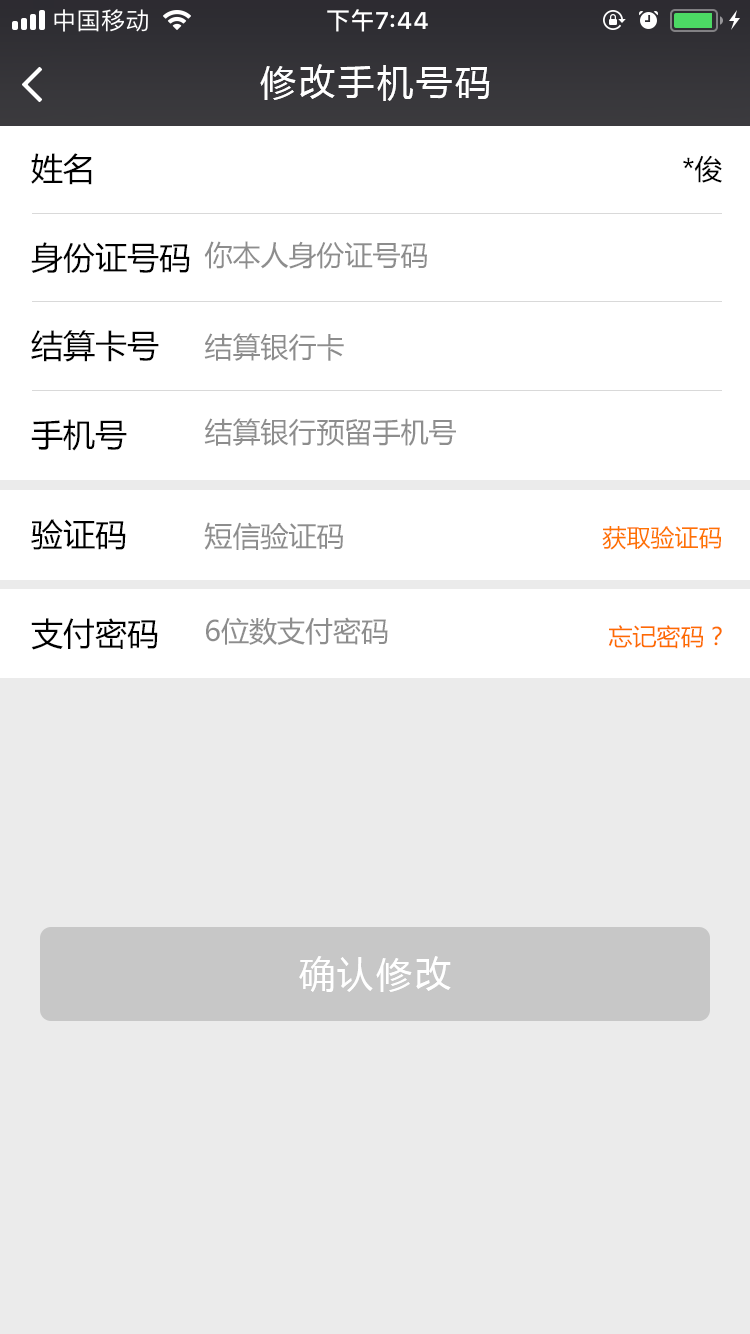
<style>
.page{position:relative;width:750px;height:1334px;background:#ebebeb}
.page>*{position:absolute;margin:0}
.t1{font:36px "MicrosoftYaHei";letter-spacing:0.08em;color:#ffffff}
.t2{font:32px "MicrosoftYaHei";color:#000000}
.t3{font:28px "MicrosoftYaHei";color:#000000}
.t4{font:28px "MicrosoftYaHei";color:#8d8d8d}
.t5{font:24px "MicrosoftYaHei";color:#fe7301}
.t6{font:24px "MicrosoftYaHei";color:#fd6c00}
</style>
<div class="page">
<p class="t1" style="left:260px;top:64px;width:230px;height:37px">修改手机号码</p>
<p class="t2" style="left:31px;top:153px;width:61px;height:32px">姓名</p>
<p class="t3" style="left:683px;top:155px;width:39px;height:28px">*俊</p>
<p class="t2" style="left:31px;top:242px;width:159px;height:31px">身份证号码</p>
<p class="t4" style="left:204px;top:241px;width:223px;height:28px">你本人身份证号码</p>
<p class="t2" style="left:31px;top:330px;width:128px;height:32px">结算卡号</p>
<p class="t4" style="left:204px;top:333px;width:140px;height:28px">结算银行卡</p>
<p class="t2" style="left:31px;top:419px;width:96px;height:32px">手机号</p>
<p class="t4" style="left:204px;top:418px;width:252px;height:28px">结算银行预留手机号</p>
<p class="t2" style="left:31px;top:519px;width:95px;height:31px">验证码</p>
<p class="t4" style="left:204px;top:522px;width:139px;height:28px">短信验证码</p>
<p class="t5" style="left:602px;top:526px;width:119px;height:24px">获取验证码</p>
<p class="t4" style="left:206px;top:617px;width:182px;height:28px">6位数支付密码</p>
<p class="t2" style="left:31px;top:618px;width:127px;height:32px">支付密码</p>
<p class="t6" style="left:608px;top:625px;width:114px;height:24px">忘记密码？</p>
<p class="t1" style="left:299px;top:956px;width:152px;height:36px">确认修改</p>
</div>
